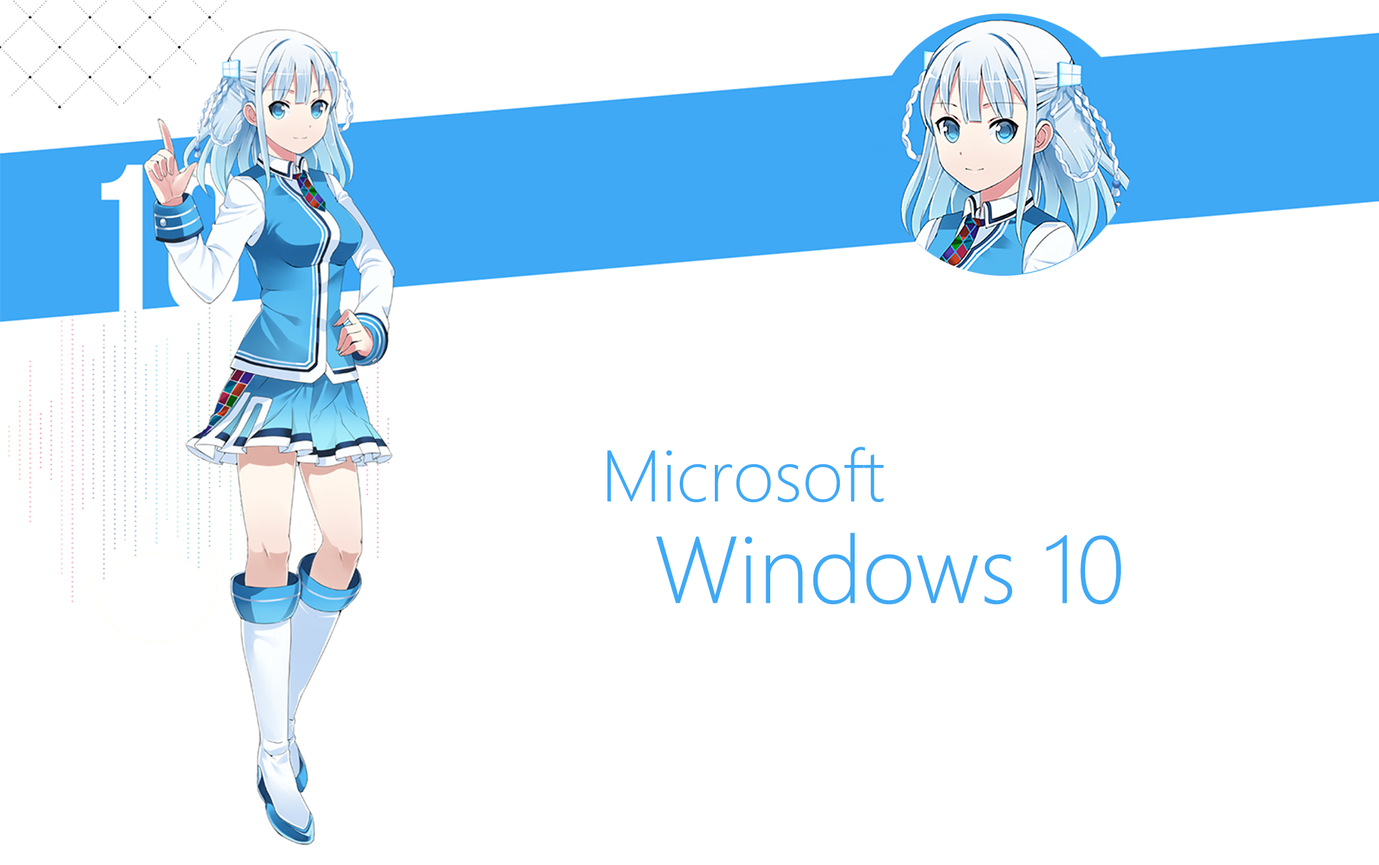
<style>
.page{position:relative;width:1379px;height:865px;background:#ffffff}
.page>*{position:absolute;margin:0}
.t1{font:67.6px "MicrosoftYaHeiUILight";color:#3fa9f5}
.t2{font:87.8px "MicrosoftYaHeiUILight";color:#3fa9f5}
</style>
<div class="page">
<p class="t1" style="left:607px;top:447px;width:277px;height:56px">Microsoft</p>
<p class="t2" style="left:656px;top:532px;width:465px;height:73px">Windows 10</p>
</div>
